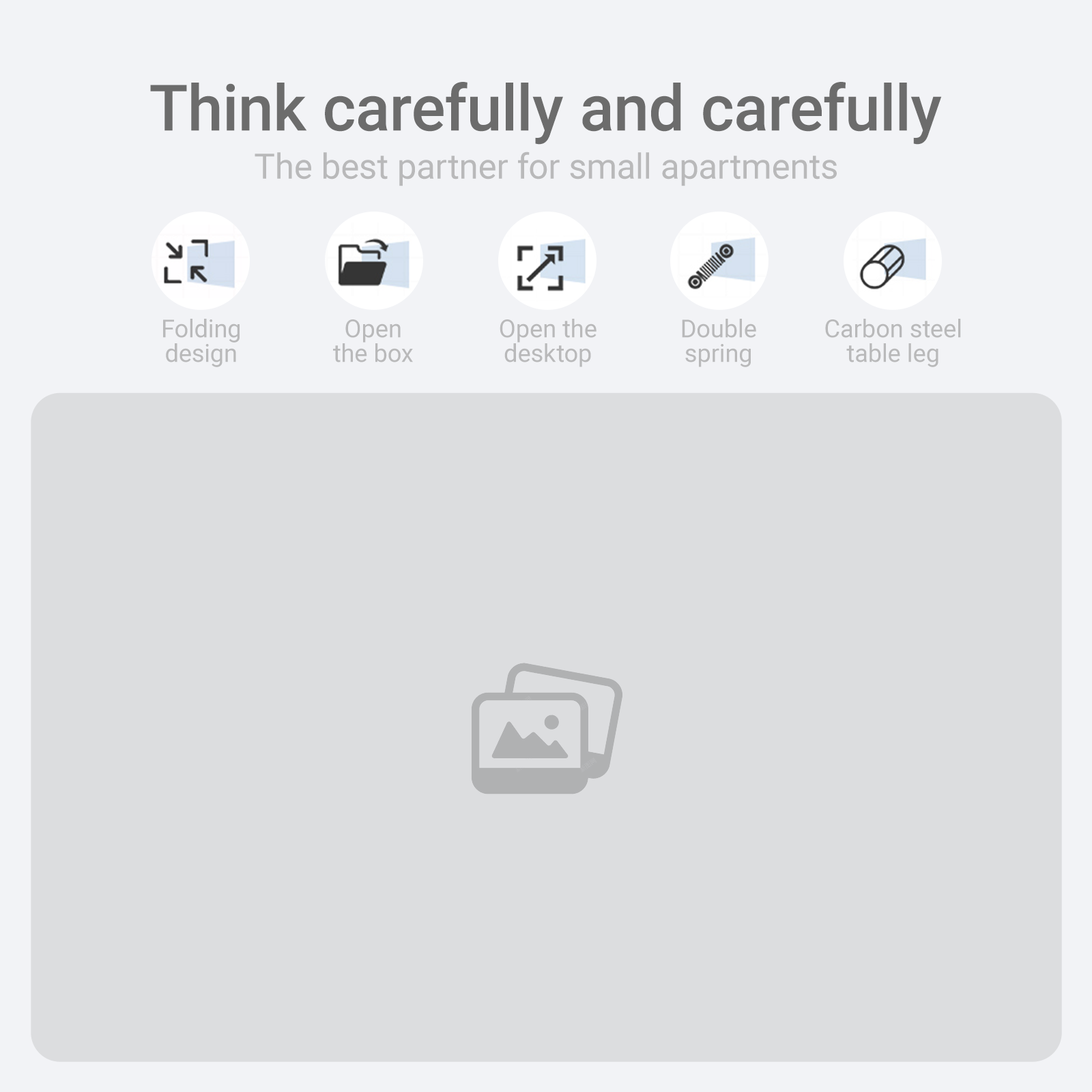
<style>
.page{position:relative;width:1092px;height:1092px;background:#dcdddf}
.page>*{position:absolute;margin:0}
.t1{font:64.1px "Roboto-Medium";color:#6c6c6c}
.t2{font:34.9px "Roboto-Regular";color:#a3a3a3}
.t3{font:24.8px/24.6px "Roboto-Regular";color:#a3a3a3}
</style>
<div class="page">
<p class="t1" style="left:150px;top:82px;width:792px;height:63px">Think carefully and carefully</p>
<p class="t2" style="left:255px;top:152px;width:582px;height:34px;opacity:0.75">The best partner for small apartments</p>
<p class="t3" style="left:163px;top:319px;width:77px;height:48px;text-align:center;opacity:0.75">Folding<br>design</p>
<p class="t3" style="left:333px;top:319px;width:80px;height:43px;text-align:center;opacity:0.75">Open<br>the box</p>
<p class="t3" style="left:500px;top:319px;width:96px;height:48px;text-align:center;opacity:0.75">Open the<br>desktop</p>
<p class="t3" style="left:682px;top:319px;width:74px;height:48px;text-align:center;opacity:0.75">Double<br>spring</p>
<p class="t3" style="left:825px;top:319px;width:136px;height:48px;text-align:center;opacity:0.75">Carbon steel<br>table leg</p>
</div>
